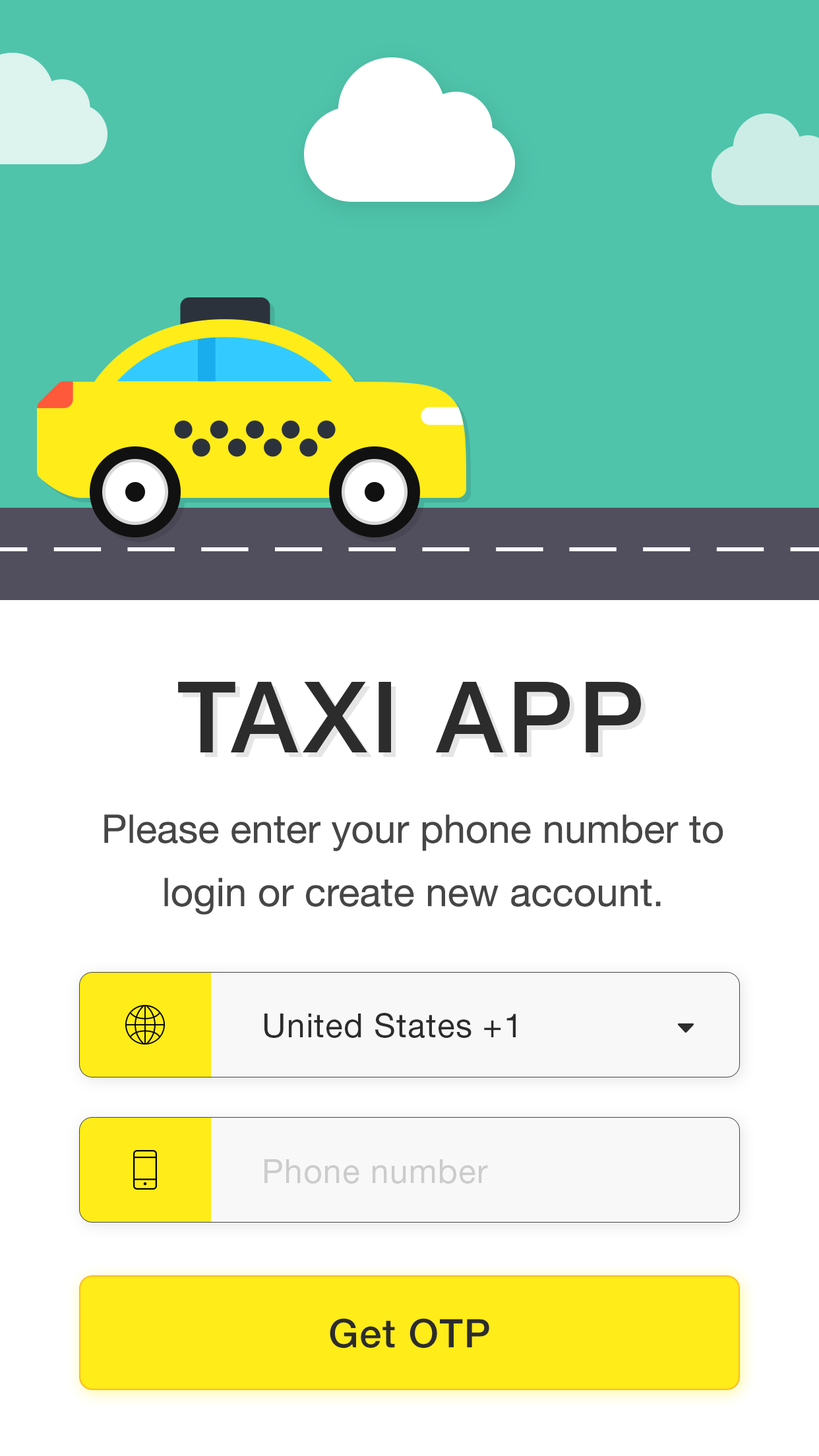
<style>
.page{position:relative;width:819px;height:1456px;background:#ffffff}
.page>*{position:absolute;margin:0}
.t1{font:98.9px "HelveticaNeueLTStd-Md";letter-spacing:0.05em;color:#2c2c2c;text-transform:uppercase}
.t2{font:39.6px/63.3px "HelveticaNeueLTStd-Roman";color:#464646}
.t3{font:33px "HelveticaNeueLTStd-Roman";letter-spacing:0.025em;color:#2c2c2c}
.t4{font:33px "HelveticaNeueLTStd-Roman";letter-spacing:0.025em;color:#cccccc}
.t5{font:39.6px "HelveticaNeueLTStd-Md";letter-spacing:0.025em;color:#2c2c2c}
</style>
<div class="page">
<p class="t1" style="left:178px;top:681px;width:463px;height:71px">Taxi App</p>
<p class="t2" style="left:104px;top:814px;width:619px;height:101px;text-align:center">Please enter your phone number to<br>login or create new account.</p>
<p class="t3" style="left:264px;top:1013px;width:252px;height:25px">United States +1</p>
<p class="t4" style="left:264px;top:1159px;width:224px;height:25px">Phone number</p>
<p class="t5" style="left:330px;top:1318px;width:159px;height:30px">Get OTP</p>
</div>
